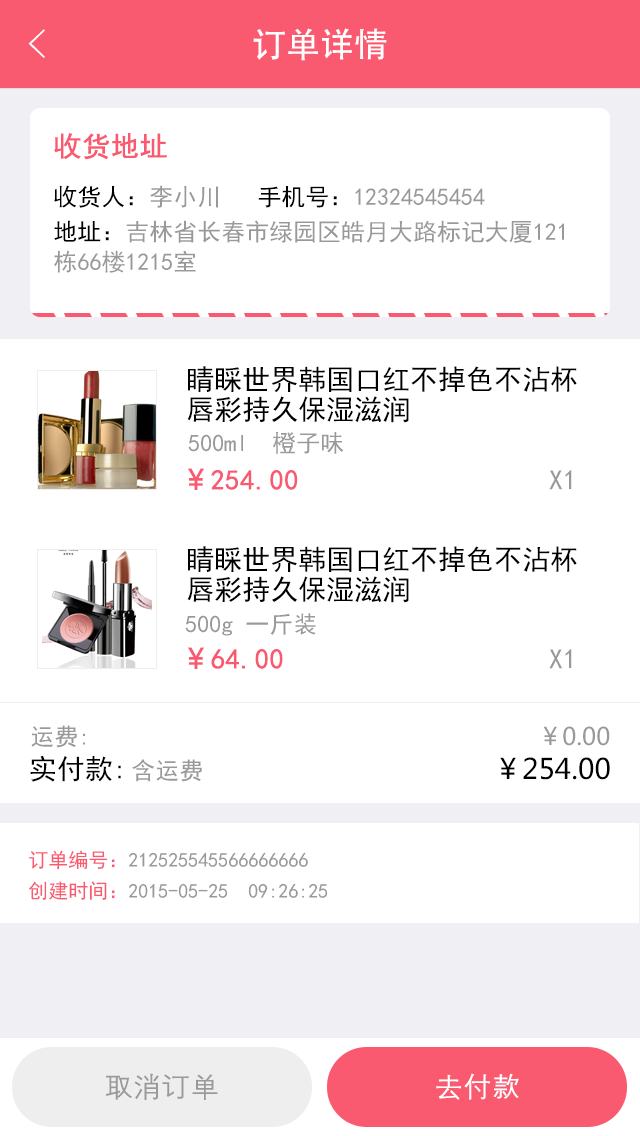
<style>
.page{position:relative;width:640px;height:1136px;background:#ffffff}
.page>*{position:absolute;margin:0}
.t1{font:40px "FZYXJW--GB1-0";color:#ffffff}
.t2{font:34px "AdobeHeitiStd-Regular";color:#ffffff}
.t3{font:28px "SimHei";color:#f95a70;font-weight:bold}
.t4{font:24px "SimHei";color:#999999}
.t5{font:24px "SimHei";color:#000000}
.t6{font:24px/30px "SimHei";color:#999999}
.t7{font:24px/30px "SimHei";color:#000000}
.t8{font:28px/30px "SimHei";color:#000000}
.t9{font:28px "MicrosoftYaHei";color:#f95a70;font-weight:bold}
.t10{font:28px "SimHei";color:#999999}
.t11{font:24px "MicrosoftYaHei";color:#999999}
.t12{font:28px "SimHei";color:#000000}
.t13{font:28px "MicrosoftYaHei";color:#000000}
.t14{font:20px "SimHei";color:#999999}
.t15{font:20px "SimHei";color:#f95a70}
.t16{font:28px "FZXH1JW--GB1-0";color:#999999;font-weight:bold}
.t17{font:28px "FZXH1JW--GB1-0";color:#ffffff;font-weight:bold}
</style>
<div class="page">
<p class="t1" style="left:28px;top:29px;width:17px;height:29px">&lt;</p>
<p class="t2" style="left:253px;top:28px;width:134px;height:33px">订单详情</p>
<p class="t2" style="left:253px;top:28px;width:134px;height:33px">订单详情</p>
<p class="t3" style="left:54px;top:133px;width:113px;height:27px">收货地址</p>
<p class="t4" style="left:54px;top:185px;width:431px;height:23px"><span class="t5">收货人：</span>李小川 <span class="t5">  手机号：</span>12324545454</p>
<p class="t6" style="left:54px;top:220px;width:510px;height:53px"><span class="t7">地址：</span>吉林省长春市绿园区皓月大路标记大厦121<br>栋66楼1215室</p>
<p class="t8" style="left:187px;top:366px;width:390px;height:57px">睛睬世界韩国口红不掉色不沾杯<br>唇彩持久保湿滋润</p>
<p class="t4" style="left:188px;top:432px;width:156px;height:22px">500ml  橙子味</p>
<p class="t3" style="left:188px;top:468px;width:110px;height:22px"><span class="t9">￥</span>254.00</p>
<p class="t10" style="left:549px;top:470px;width:23px;height:20px">X1</p>
<p class="t8" style="left:187px;top:546px;width:390px;height:57px">睛睬世界韩国口红不掉色不沾杯<br>唇彩持久保湿滋润</p>
<p class="t4" style="left:185px;top:613px;width:131px;height:23px">500g 一斤装</p>
<p class="t3" style="left:188px;top:647px;width:95px;height:22px"><span class="t9">￥</span>64.00</p>
<p class="t10" style="left:549px;top:649px;width:23px;height:20px">X1</p>
<p class="t4" style="left:31px;top:725px;width:54px;height:23px">运费:</p>
<p class="t11" style="left:543px;top:726px;width:67px;height:20px">￥0.00</p>
<p class="t12" style="left:30px;top:755px;width:91px;height:27px">实付款:</p>
<p class="t4" style="left:132px;top:759px;width:70px;height:23px">含运费</p>
<p class="t13" style="left:500px;top:757px;width:110px;height:23px">￥254.00</p>
<p class="t14" style="left:29px;top:850px;width:279px;height:20px"><span class="t15">订单编号：</span>212525545566666666</p>
<p class="t14" style="left:29px;top:881px;width:299px;height:19px"><span class="t15">创建时间：</span>2015-05-25  09:26:25</p>
<p class="t16" style="left:105px;top:1073px;width:113px;height:27px">取消订单</p>
<p class="t17" style="left:436px;top:1073px;width:83px;height:27px">去付款</p>
</div>
